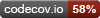
<style>
.page{position:relative;width:100px;height:18px}
.page>*{position:absolute;margin:0}
.t1{font:12px "HelveticaNeue";color:#ffffff}
.t2{font:11px "Arial-BoldMT";color:#ffffff;scale:1.1 1}
</style>
<div class="page">
<p class="t1" style="left:4px;top:4px;width:60px;height:9px">codecov.io</p>
<p class="t2" style="left:72px;top:5px;width:24px;height:8px">58%</p>
</div>
